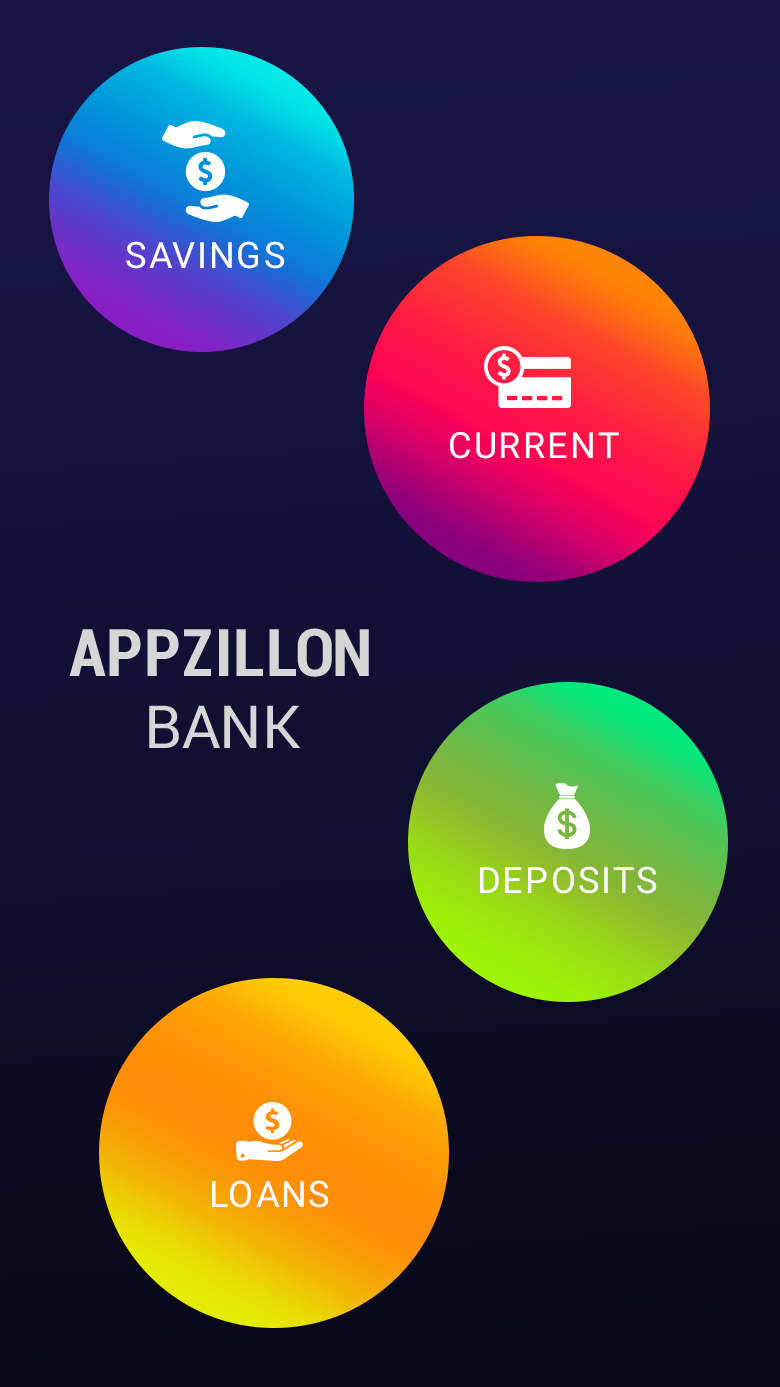
<style>
.page{position:relative;width:780px;height:1387px}
.page>*{position:absolute;margin:0}
.t1{font:36.4px "Roboto-Regular";letter-spacing:0.05em;color:#ffffff;text-transform:uppercase}
.t2{font:36px "Roboto-Regular";letter-spacing:0.05em;color:#ffffff;text-transform:uppercase}
.t3{font:65.8px "Roboto-BoldCondensed";color:#d6d6d6;text-transform:uppercase}
.t4{font:59.6px "Roboto-Regular";color:#d6d6d6;text-transform:uppercase}
</style>
<div class="page">
<p class="t1" style="left:126px;top:241px;width:159px;height:28px">Savings</p>
<p class="t2" style="left:450px;top:432px;width:169px;height:27px">Current</p>
<p class="t3" style="left:69px;top:628px;width:300px;height:120px;text-align:center">APPZILLON<br><span class="t4">Bank</span></p>
<p class="t1" style="left:480px;top:866px;width:177px;height:28px">Deposits</p>
<p class="t1" style="left:212px;top:1180px;width:117px;height:28px">LOANS</p>
</div>
